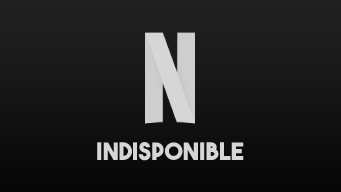
<style>
.page{position:relative;width:341px;height:192px}
.page>*{position:absolute;margin:0}
.t1{font:24px "TheBoldFont";color:#d6d6d6}
</style>
<div class="page">
<p class="t1" style="left:97px;top:141px;width:147px;height:20px">INDISPONIBLE</p>
</div>
